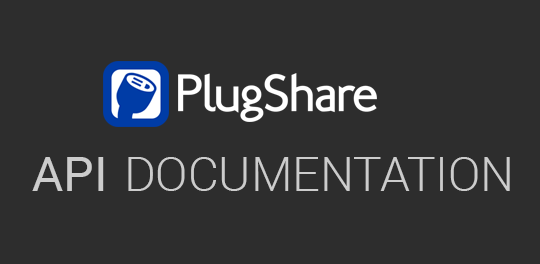
<style>
.page{position:relative;width:540px;height:264px;background:#2d2d2d}
.page>*{position:absolute;margin:0}
.t1{font:48px "Roboto-Regular";color:#cccccc}
.t2{font:48px "Roboto-Light";color:#cccccc;text-transform:uppercase}
</style>
<div class="page">
<p class="t1" style="left:32px;top:157px;width:72px;height:34px">API</p>
<p class="t2" style="left:128px;top:157px;width:382px;height:34px">Documentation</p>
</div>
